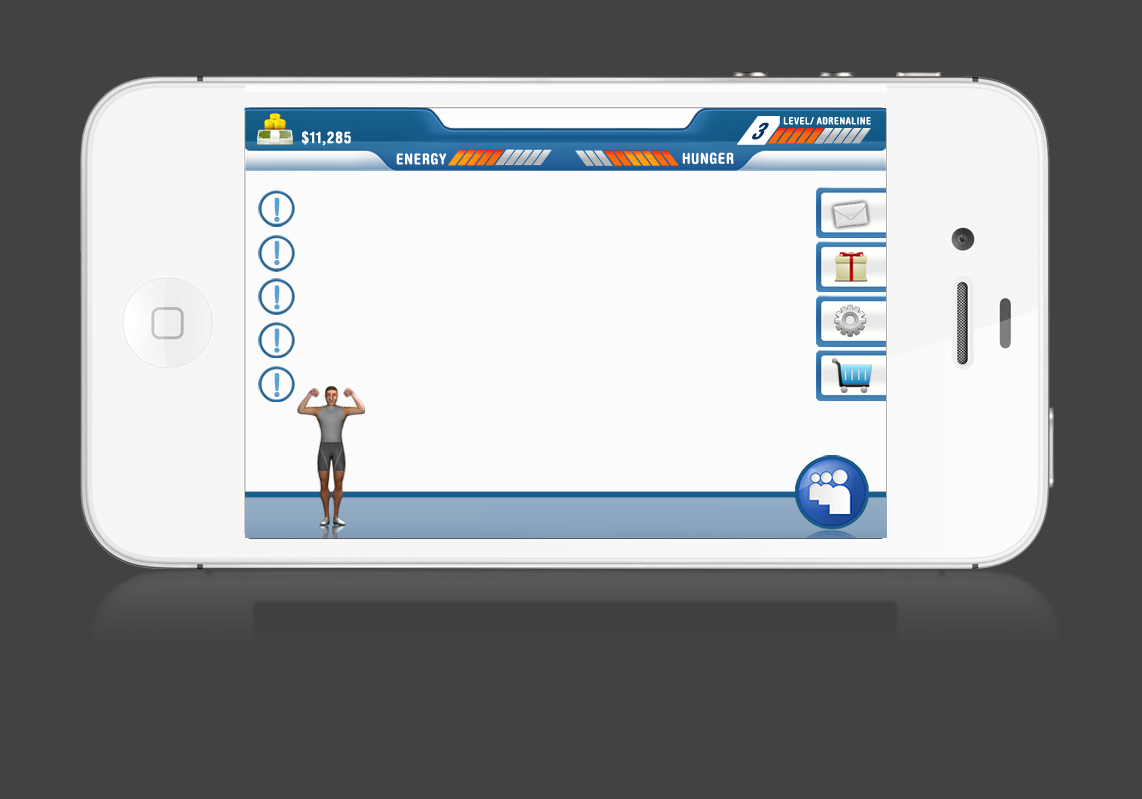
<style>
.page{position:relative;width:1142px;height:799px;background:#424242}
.page>*{position:absolute;margin:0}
.t1{font:27.1px "HelveticaRounded-BoldCond";letter-spacing:0.05em;color:#0b355f;scale:0.83 1}
.t2{font:10px "HelveticaRounded-BoldCond";letter-spacing:0.05em;color:#ffffff}
.t3{font:16px "HelveticaRounded-BoldCond";letter-spacing:0.05em;color:#ffffff}
.t4{font:15px "HelveticaRounded-BoldCond";letter-spacing:0.05em;color:#ffffff}
.t5{font:32.2px "HelveticaRounded-BoldCond";color:#5da1d3}
</style>
<div class="page">
<p class="t1" style="left:752px;top:122px;width:17px;height:18px">3</p>
<p class="t2" style="left:783px;top:117px;width:88px;height:8px">LEVEL/ ADRENALINE</p>
<p class="t3" style="left:301px;top:130px;width:50px;height:16px">$11,285</p>
<p class="t4" style="left:396px;top:153px;width:51px;height:12px">ENERGY</p>
<p class="t4" style="left:682px;top:152px;width:52px;height:12px">HUNGER</p>
<p class="t5" style="left:274px;top:197px;width:6px;height:25px">!</p>
<p class="t5" style="left:274px;top:240px;width:6px;height:25px">!</p>
<p class="t5" style="left:274px;top:285px;width:6px;height:25px">!</p>
<p class="t5" style="left:274px;top:328px;width:6px;height:25px">!</p>
<p class="t5" style="left:274px;top:373px;width:6px;height:25px">!</p>
</div>
